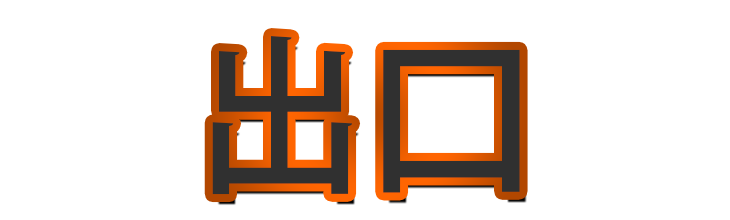
<style>
.page{position:relative;width:730px;height:220px;background:#ffffff}
.page>*{position:absolute;margin:0}
.t1{font:169.9px "KozGoPr6N-Medium";color:#303030}
</style>
<div class="page">
<p class="t1" style="left:212px;top:36px;width:308px;height:159px">出口</p>
</div>
